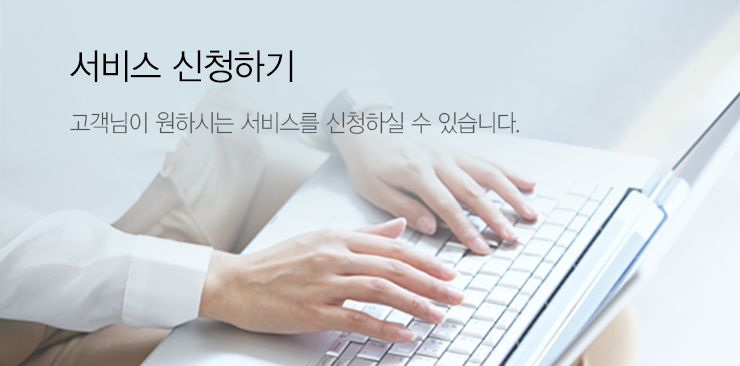
<style>
.page{position:relative;width:740px;height:366px}
.page>*{position:absolute;margin:0}
.t1{font:36px "YDVYGO32";letter-spacing:-0.025em;color:#000000;scale:0.95 1}
.t2{font:24px "YDVYGO31";letter-spacing:-0.025em;color:#555555;scale:0.91 1}
</style>
<div class="page">
<p class="t1" style="left:70px;top:50px;width:223px;height:33px">서비스 신청하기</p>
<p class="t2" style="left:70px;top:112px;width:449px;height:22px">고객님이 원하시는 서비스를 신청하실 수 있습니다.</p>
</div>
